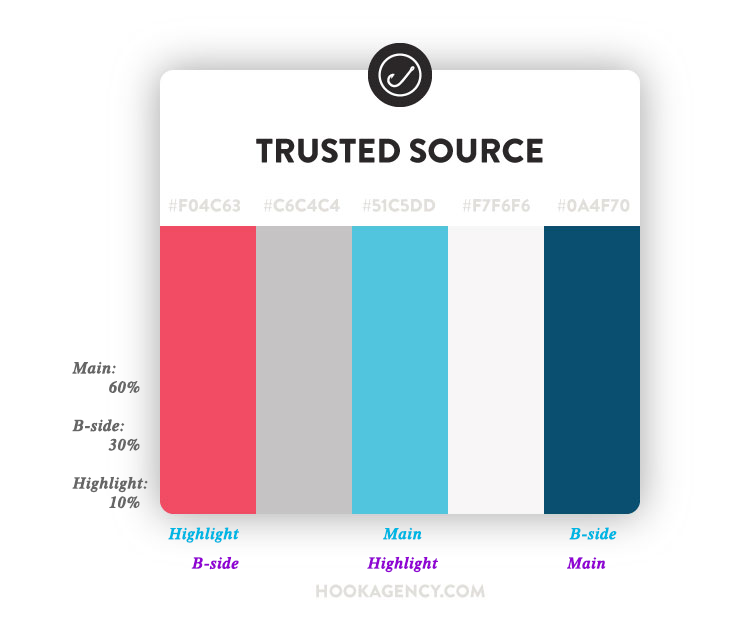
<style>
.page{position:relative;width:750px;height:617px;background:#ffffff}
.page>*{position:absolute;margin:0}
.t1{font:16px "UTMTimesBold-Italic";letter-spacing:0.025em;color:#666666;font-weight:bold}
.t2{font:16px "UTMTimesBold-Italic";letter-spacing:0.025em;color:#00b6e3;font-weight:bold}
.t3{font:16px "UTMTimesBold-Italic";letter-spacing:0.025em;color:#9104d3;font-weight:bold}
</style>
<div class="page">
<p class="t1" style="left:72px;top:361px;width:76px;height:148px">Main:<br> 60%<br><br>B-side:<br> 30%<br><br>Highlight:<br> 10%</p>
<p class="t2" style="left:168px;top:527px;width:71px;height:16px">Highlight</p>
<p class="t2" style="left:383px;top:527px;width:39px;height:13px">Main</p>
<p class="t2" style="left:569px;top:527px;width:48px;height:13px">B-side</p>
<p class="t3" style="left:191px;top:556px;width:48px;height:14px">B-side</p>
<p class="t3" style="left:367px;top:556px;width:71px;height:17px">Highlight</p>
<p class="t3" style="left:567px;top:557px;width:39px;height:12px">Main</p>
</div>
